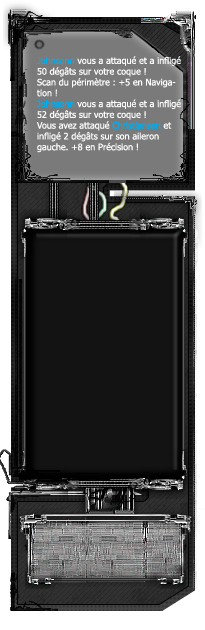
<style>
.page{position:relative;width:205px;height:630px;background:#131313}
.page>*{position:absolute;margin:0}
.t1{font:9px "Tahoma";color:#fefefe}
.t2{font:9px "Tahoma";color:#00aeef}
</style>
<div class="page">
<p class="t1" style="left:36px;top:56px;width:145px;height:97px"><span class="t2">Johnsonn</span> vous a attaqué et a infligé 50 dégâts sur votre coque !<br>Scan du périmètre : +5 en Navigation !<br><span class="t2">Johnsonn</span> vous a attaqué et a infligé 52 dégâts sur votre coque !<br>Vous avez attaqué <span class="t2">Christiansen</span> et infligé 2 dégâts sur son aileron gauche. +8 en Précision !</p>
</div>
